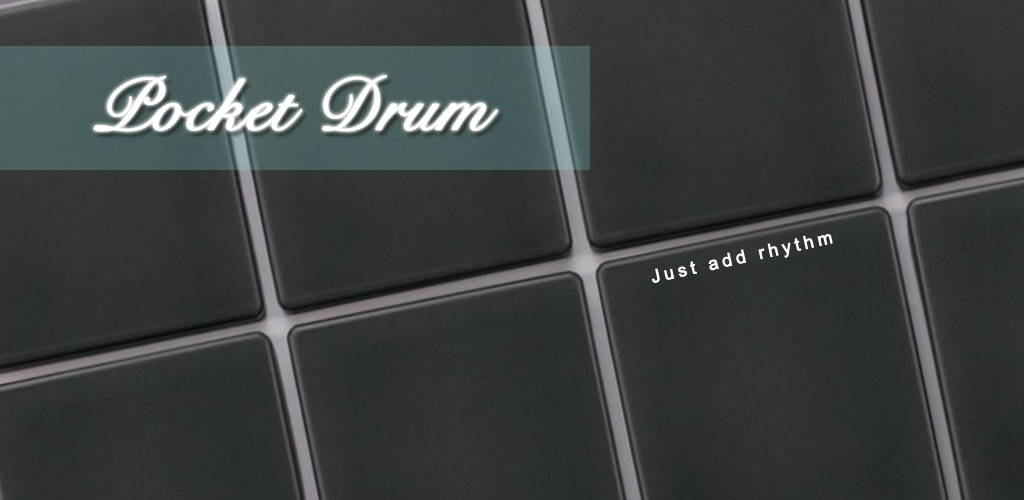
<style>
.page{position:relative;width:1024px;height:500px}
.page>*{position:absolute;margin:0}
.t1{font:72px "SnellRoundhand";color:#ffffff;font-weight:bold}
.t2{font:18px "ArialMT";letter-spacing:0.2em;color:#ffffff;font-weight:bold}
</style>
<div class="page">
<p class="t1" style="left:93px;top:75px;width:405px;height:57px">Pocket Drum</p>
<p class="t2" style="left:652px;top:234px;width:181px;height:49px;rotate:-13deg">Just add rhythm</p>
</div>
